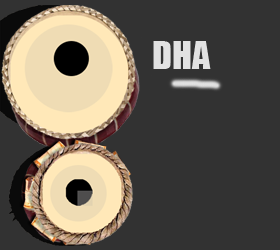
<style>
.page{position:relative;width:280px;height:250px;background:#323232}
.page>*{position:absolute;margin:0}
.t1{font:36px "Impact";color:#e2e2e2}
</style>
<div class="page">
<p class="t1" style="left:153px;top:41px;width:58px;height:28px">DHA</p>
</div>
